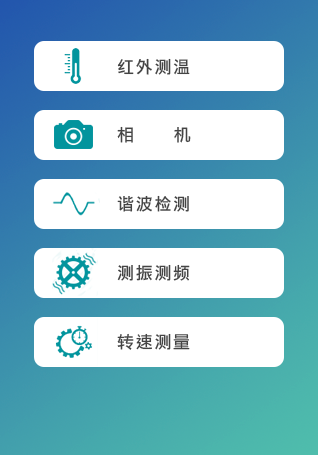
<style>
.page{position:relative;width:318px;height:455px;background:#ffffff}
.page>*{position:absolute;margin:0}
.t1{font:17px "LiHeiPro";letter-spacing:0.1em;color:#444444}
.t2{font:17px "LiHeiPro";letter-spacing:2.34em;color:#444444}
</style>
<div class="page">
<p class="t1" style="left:117px;top:58px;width:73px;height:17px">红外测温</p>
<p class="t2" style="left:117px;top:126px;width:74px;height:17px">相机</p>
<p class="t1" style="left:117px;top:195px;width:72px;height:17px">谐波检测</p>
<p class="t1" style="left:117px;top:264px;width:73px;height:17px">测振测频</p>
<p class="t1" style="left:117px;top:333px;width:73px;height:17px">转速测量</p>
</div>
